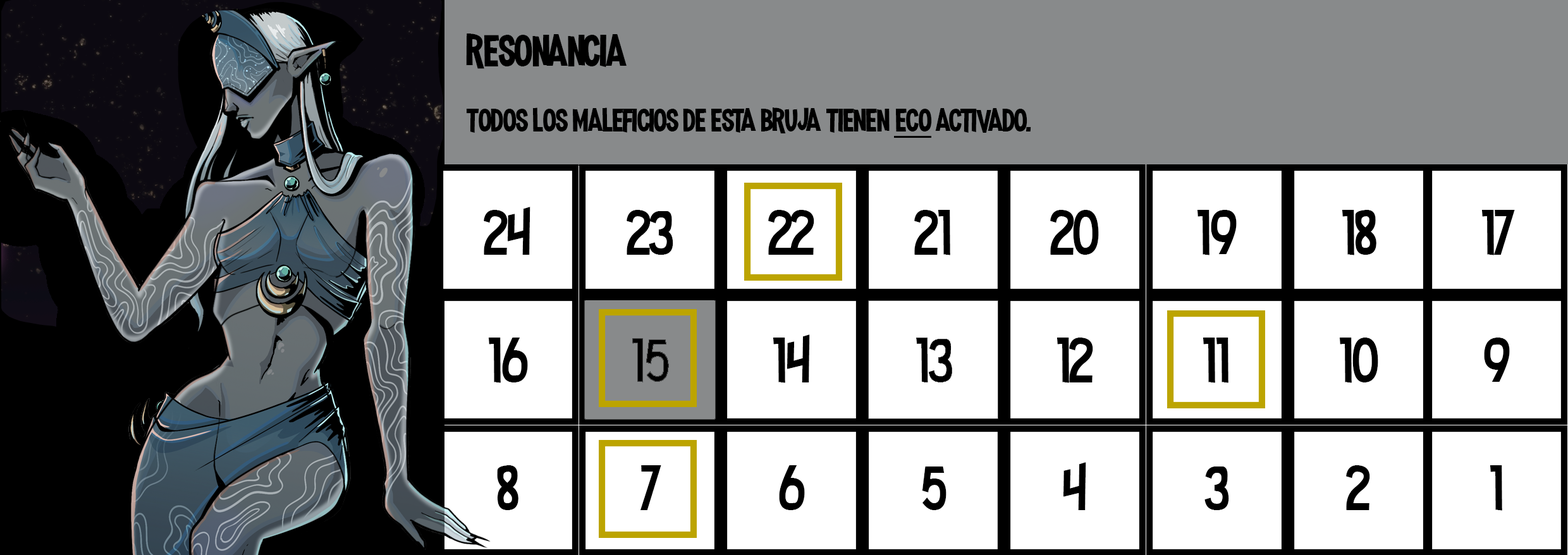
<style>
.page{position:relative;width:1568px;height:555px;background:#ffffff}
.page>*{position:absolute;margin:0}
.t1{font:58.3px "MadnessHyperactive";color:#000000}
.t2{font:42.2px "MadnessHyperactive";color:#000000}
</style>
<div class="page">
<p class="t1" style="left:466px;top:34px;width:161px;height:35px">resonancia</p>
<p class="t2" style="left:466px;top:107px;width:565px;height:26px">todos los maleficios de esta bruja tienen eco activado.</p>
</div>
